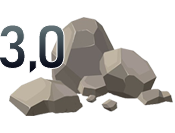
<style>
.page{position:relative;width:175px;height:133px;background:#ffffff}
.page>*{position:absolute;margin:0}
.t1{font:60px "Bahnschrift-SemiBold";letter-spacing:-0.05em}
</style>
<div class="page">
<p class="t1" style="left:0px;top:25px;width:64px;height:49px">3,0</p>
</div>
